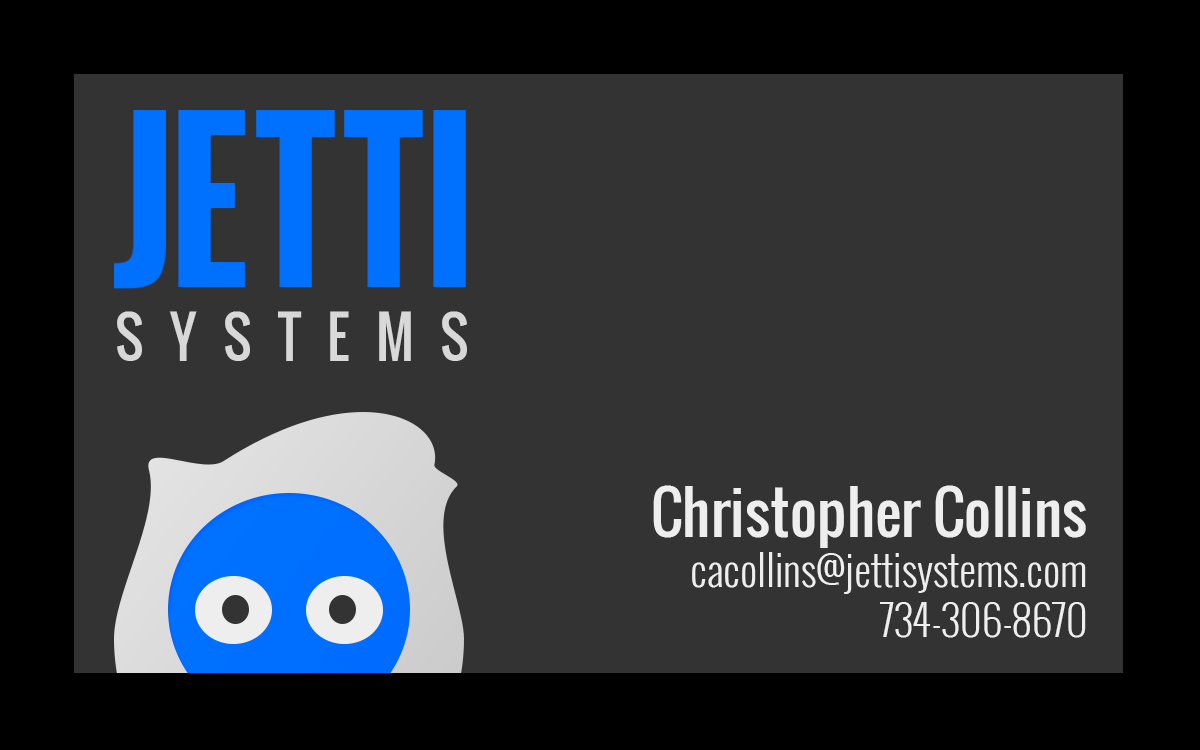
<style>
.page{position:relative;width:1200px;height:750px;background:#333333}
.page>*{position:absolute;margin:0}
.t1{font:200.9px "Oswald-Bold";letter-spacing:-0.05em;color:#0071ff;scale:0.9 1}
.t2{font:200.9px "Oswald-Bold";letter-spacing:0.03em;color:#0071ff;scale:0.9 1}
.t3{font:200.9px "Oswald-Bold";letter-spacing:-0.01em;color:#0071ff;scale:0.9 1}
.t4{font:200.9px "Oswald-Bold";letter-spacing:0.11em;color:#0071ff;scale:0.9 1}
.t5{font:55.9px "Oswald-Regular";letter-spacing:0.5em;color:#d8d8d8;scale:0.95 1}
.t6{font:41.7px "Oswald-Light";color:#eeeeee}
.t7{font:58.3px "Oswald-Regular";color:#eeeeee}
</style>
<div class="page">
<p class="t1" style="left:178px;top:110px;width:67px;height:177px">E</p>
<p class="t2" style="left:256px;top:110px;width:79px;height:177px">T</p>
<p class="t3" style="left:344px;top:110px;width:79px;height:177px">T</p>
<p class="t4" style="left:433px;top:110px;width:33px;height:177px">I</p>
<p class="t5" style="left:117px;top:311px;width:350px;height:50px">SYSTEMS</p>
<p class="t6" style="left:653px;top:485px;width:433px;height:153px;text-align:right"><span class="t7">Christopher Collins<br></span>cacollins@jettisystems.com<br>734-306-8670</p>
</div>
